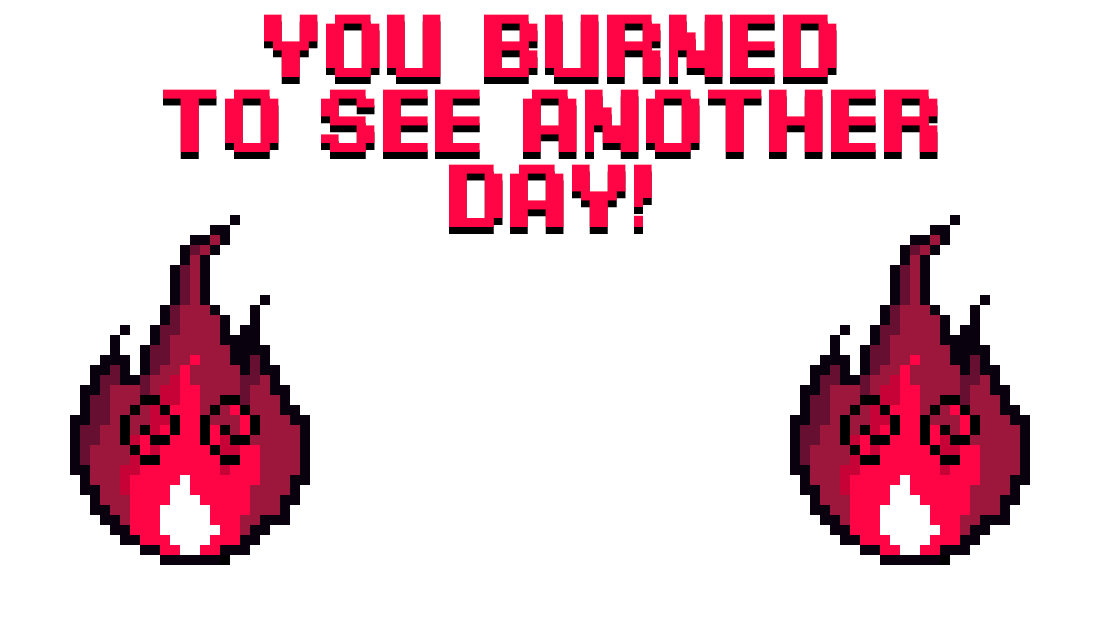
<style>
.page{position:relative;width:1100px;height:619px;background:#ffffff}
.page>*{position:absolute;margin:0}
.t1{font:91.5px/75px "PixelDigivolve";letter-spacing:-0.01em;color:#ff0546}
</style>
<div class="page">
<p class="t1" style="left:163px;top:14px;width:775px;height:213px;text-align:center">You Burned<br>to see another<br>Day!</p>
</div>
